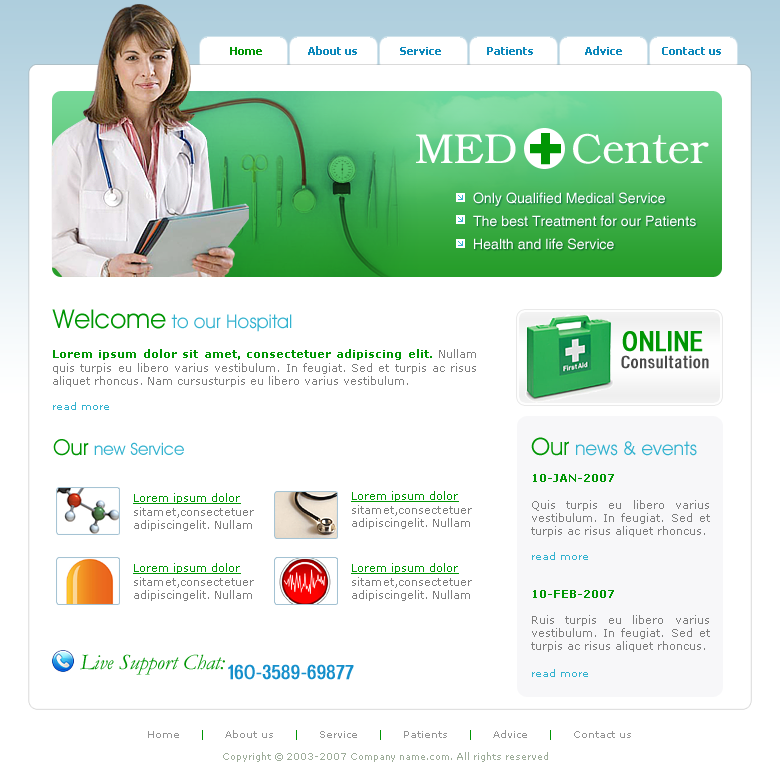
<style>
.page{position:relative;width:780px;height:780px;background:#ffffff}
.page>*{position:absolute;margin:0}
.t1{font:11px "Tahoma-Bold";color:#0c88bb}
.t2{font:11px "Tahoma-Bold";color:#009604}
.t3{font:42px "Bookman";color:#ffffff}
.t4{font:62px "Impact";color:#009604;font-weight:bold}
.t5{font:14px/23px "Helios";color:#ffffff}
.t6{font:19px "AvantGardeITCbyBT-Book";color:#33b2cf}
.t7{font:26px "AvantGardeITCbyBT-Book";color:#009604}
.t8{font:28px "HeadacheNormal";color:#009604}
.t9{font:11px "Verdana";color:#7e7e7e}
.t10{font:11px "Verdana-Bold";color:#009604}
.t11{font:10px "Verdana";color:#33b2cf}
.t12{font:17px "HeadacheNormal";letter-spacing:0.025em;color:#484848}
.t13{font:24px "AvantGardeITCbyBT-Book";color:#009604}
.t14{font:17px "AvantGardeITCbyBT-Book";color:#33b2cf}
.t15{font:22px "AvantGardeITCbyBT-Book";color:#009604}
.t16{font:11px "Verdana";color:#009604;text-decoration:underline}
.t17{font:22px "Garamond-Italic";color:#009604}
.t18{font:20px "HeadacheNormal";color:#158fcb}
.t19{font:9px/22px "Verdana";color:#9ead9a}
.t20{font:10px/22px "Verdana";color:#949494}
.t21{font:10px/22px "Verdana";color:#009604}
</style>
<div class="page">
<p class="t1" style="left:230px;top:46px;width:491px;height:9px"><span class="t2">     Home </span>              About us              Service               Patients                 Advice             Contact us</p>
<p class="t3" style="left:416px;top:133px;width:293px;height:31px">MED    Center</p>
<p class="t4" style="left:530px;top:133px;width:31px;height:32px">+</p>
<p class="t5" style="left:473px;top:192px;width:223px;height:58px">Only Qualified Medical Service<br>The best Treatment for our Patients<br>Health and life Service</p>
<p class="t6" style="left:52px;top:309px;width:240px;height:23px"><span class="t7">Welcome </span>to our Hospital</p>
<p class="t8" style="left:622px;top:331px;width:81px;height:21px">ONLINE</p>
<p class="t9" style="left:53px;top:349px;width:423px;height:61px;text-align:justify"><span class="t10">Lorem ipsum dolor sit amet, consectetuer adipiscing elit. </span>Nullam quis turpis eu libero varius vestibulum. In feugiat. Sed et turpis ac risus aliquet rhoncus. Nam cursusturpis eu libero varius vestibulum. <br><br><span class="t11">read more</span></p>
<p class="t12" style="left:621px;top:355px;width:88px;height:14px">Consultation</p>
<p class="t6" style="left:531px;top:437px;width:166px;height:19px"><span class="t13">Our </span>news &amp; events</p>
<p class="t14" style="left:53px;top:439px;width:131px;height:17px"><span class="t15">Our </span>new Service</p>
<p class="t9" style="left:531px;top:474px;width:179px;height:203px;text-align:justify"><span class="t10">10-JAN-2007<br><br></span>Quis turpis eu libero varius vestibulum. In feugiat. Sed et turpis ac risus aliquet rhoncus. <br><br><span class="t11">read more<br><br><br></span><span class="t10">10-FEB-2007<br><br></span>Ruis turpis eu libero varius vestibulum. In feugiat. Sed et turpis ac risus aliquet rhoncus. <br><br><span class="t11">read more</span></p>
<p class="t9" style="left:133px;top:493px;width:121px;height:38px;text-align:justify"><span class="t16">Lorem ipsum dolor</span> <br>sitamet,consectetuer adipiscingelit. Nullam</p>
<p class="t9" style="left:351px;top:491px;width:121px;height:38px;text-align:justify"><span class="t16">Lorem ipsum dolor <br></span>sitamet,consectetuer adipiscingelit. Nullam</p>
<p class="t9" style="left:133px;top:563px;width:121px;height:38px;text-align:justify"><span class="t16">Lorem ipsum dolor</span> <br>sitamet,consectetuer adipiscingelit. Nullam</p>
<p class="t9" style="left:351px;top:563px;width:121px;height:38px;text-align:justify"><span class="t16">Lorem ipsum dolor</span> <br>sitamet,consectetuer adipiscingelit. Nullam</p>
<p class="t17" style="left:80px;top:654px;width:145px;height:21px">Live Support Chat:</p>
<p class="t18" style="left:228px;top:664px;width:126px;height:16px">160-3589-69877</p>
<p class="t19" style="left:148px;top:730px;width:483px;height:32px;text-align:center"><span class="t20">  Home    </span><span class="t21"> | </span><span class="t20">    About us     </span><span class="t21">| </span><span class="t20">    Service  </span><span class="t21">   |  </span><span class="t20">   Patients   </span><span class="t21">  |     </span><span class="t20">Advice  </span><span class="t21">   |   </span><span class="t20">  Contact us<br></span>Copyright © 2003-2007 Company name.com. All rights reserved</p>
</div>
